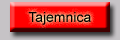
<style>
.page{position:relative;width:120px;height:40px}
.page>*{position:absolute;margin:0}
.t1{font:14px "ArialMT";color:#000000}
</style>
<div class="page">
<p class="t1" style="left:28px;top:12px;width:63px;height:13px">Tajemnica</p>
</div>
